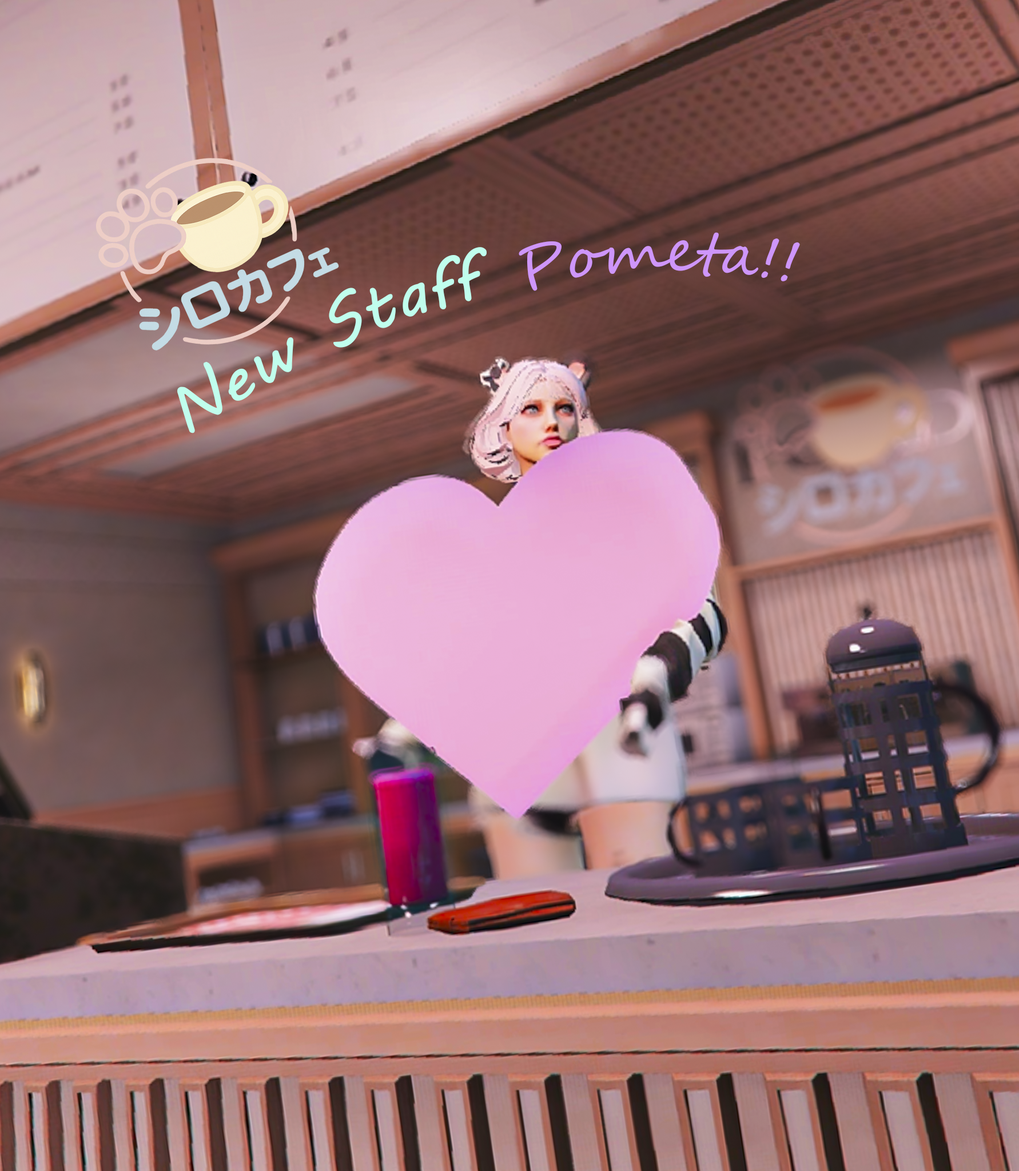
<style>
.page{position:relative;width:1019px;height:1171px}
.page>*{position:absolute;margin:0}
.t1{font:57.2px "SegoeScript";color:#ce96fa}
.t2{font:65.4px "MVBoli";color:#c0feed}
</style>
<div class="page">
<p class="t1" style="left:518px;top:232px;width:282px;height:59px">Pometa!!</p>
<p class="t2" style="left:177px;top:247px;width:309px;height:186px;rotate:-25deg">New Staff</p>
</div>
